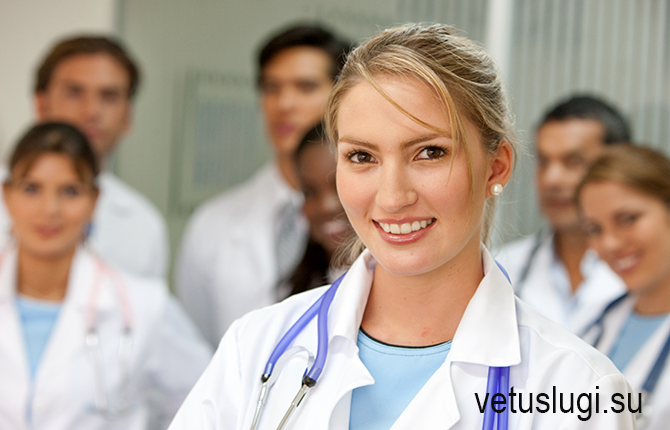
<style>
.page{position:relative;width:670px;height:430px}
.page>*{position:absolute;margin:0}
.t1{font:37.5px "ArialNarrow";letter-spacing:0.002em;color:#0c0c0c;scale:1.04 1}
</style>
<div class="page">
<p class="t1" style="left:474px;top:386px;width:168px;height:35px">vetuslugi.su</p>
</div>
